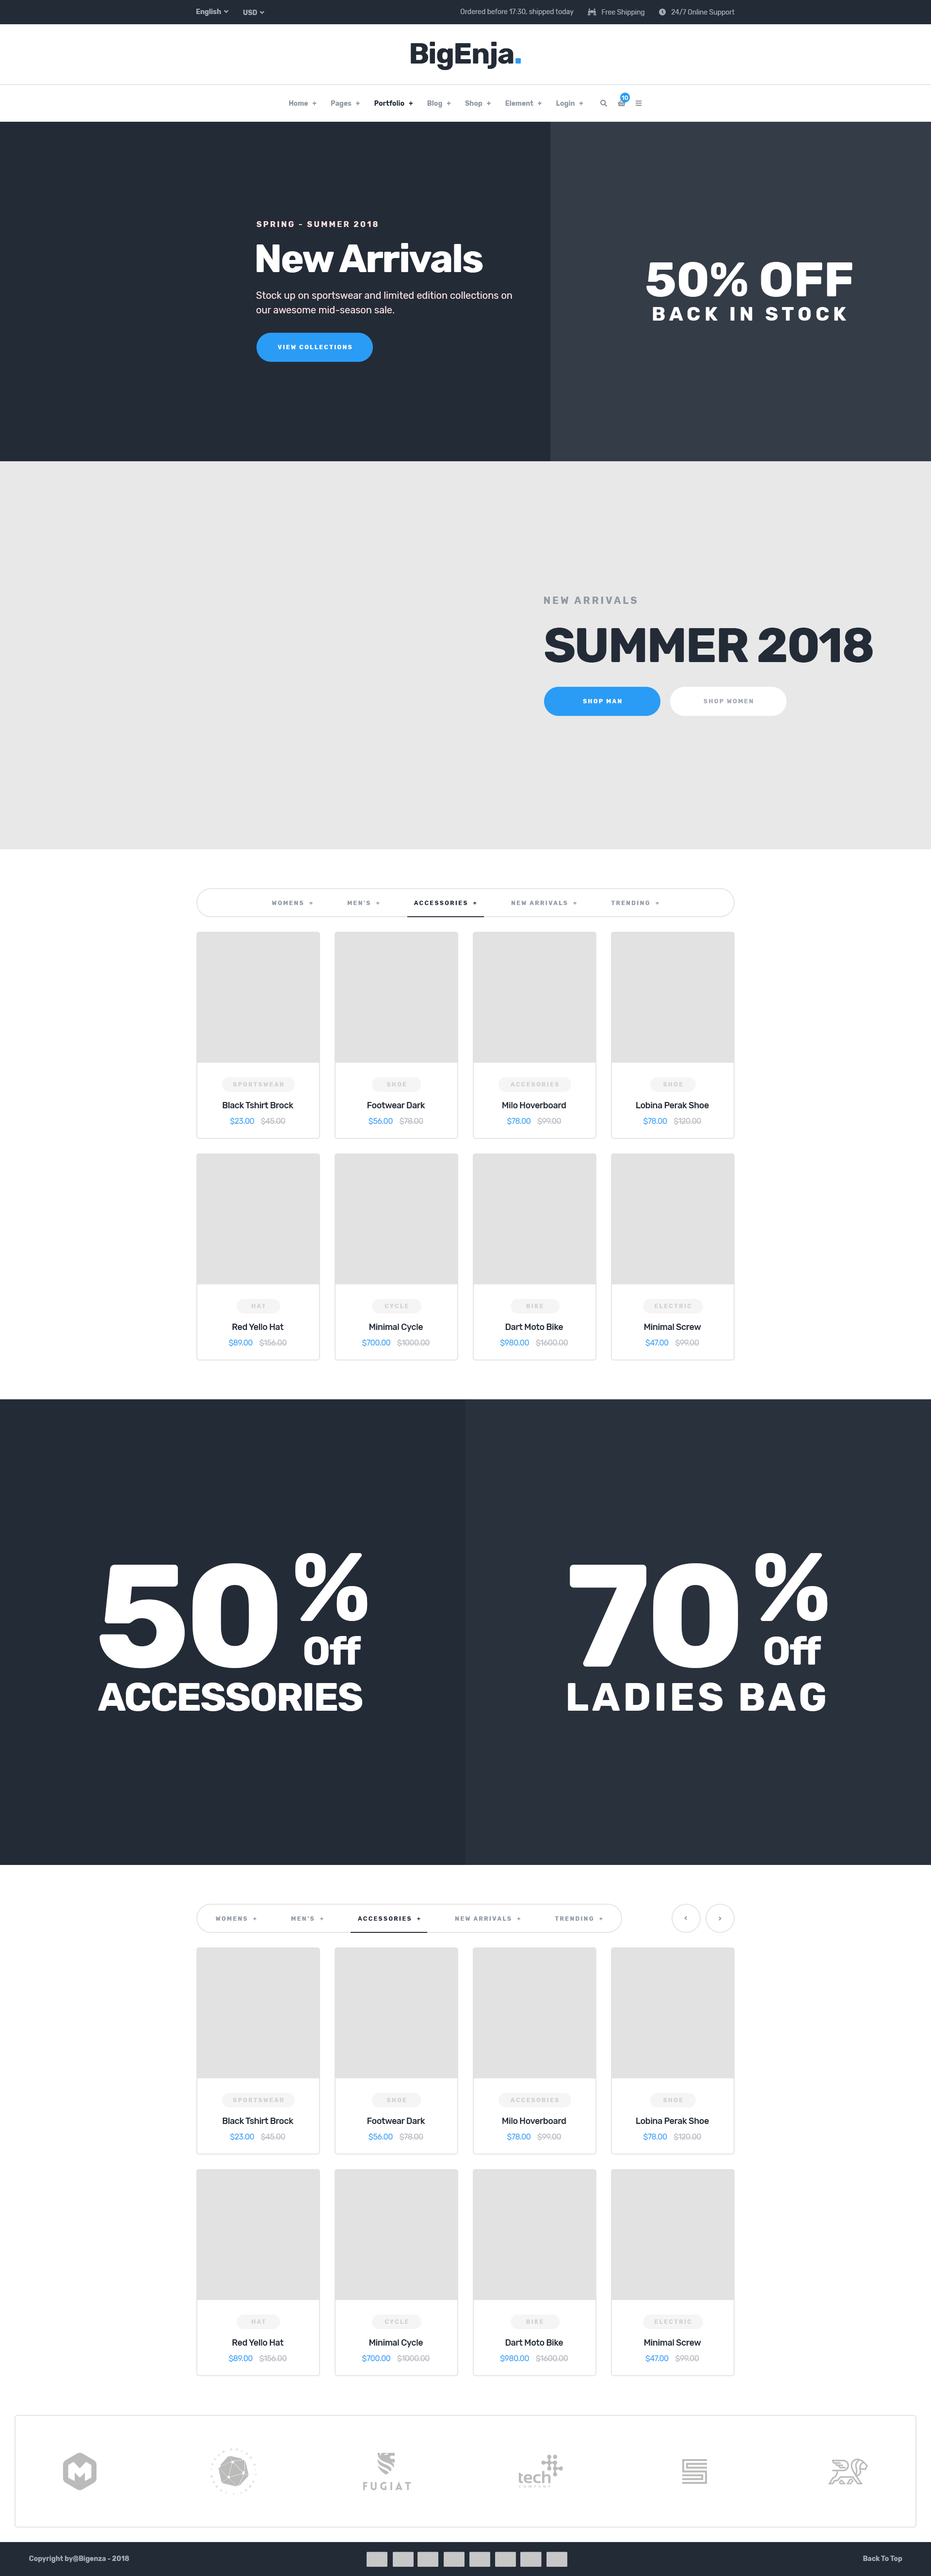
<style>
.page{position:relative;width:931px;height:2576px;background:#ffffff}
.page>*{position:absolute;margin:0}
.t1{font:6.8px "Rubik-Regular";color:#a3acb9}
.t2{font:29.1px "Rubik-Bold";letter-spacing:-0.03em;color:#232b37}
.t3{font:29.1px "Rubik-Bold";letter-spacing:-0.03em;color:#2a9cf5}
.t4{font:5.8px "Rubik-Medium";color:#ffffff}
.t5{font:7.8px "Rubik-Bold";letter-spacing:0.2em;color:#ffdfde;text-transform:uppercase}
.t6{font:38.8px "Rubik-Bold";letter-spacing:-0.03em;color:#ffffff}
.t7{font:19.4px/24.3px "Rubik-Bold";letter-spacing:0.2em;color:#ffffff}
.t8{font:48.5px/24.3px "Rubik-Bold";color:#ffffff}
.t9{font:9.7px/14.6px "Rubik-Regular";color:#ffe6e5}
.t10{font:5.8px "Rubik-Bold";letter-spacing:0.2em;color:#ffffff;text-transform:uppercase}
.t11{font:9.7px/58.2px "Rubik-Bold";letter-spacing:0.2em;color:#9097a2;text-transform:uppercase}
.t12{font:48.5px/58.2px "Rubik-Bold";letter-spacing:-0.03em;color:#232b37}
.t13{font:5.8px "Rubik-Bold";letter-spacing:0.2em;color:#9fa5af;text-transform:uppercase}
.t14{font:5.8px "Rubik-Bold";letter-spacing:0.2em;color:#8f97a2;text-transform:uppercase}
.t15{font:5.8px "Rubik-Bold";letter-spacing:0.2em;color:#232b37;text-transform:uppercase}
.t16{font:5.8px "Rubik-Bold";letter-spacing:0.2em;color:#d1d0d0;text-transform:uppercase}
.t17{font:8.7px "Rubik-Medium";letter-spacing:-0.03em;color:#232b37}
.t18{font:7.8px "Rubik-Regular";letter-spacing:-0.03em;color:#2a9cf5}
.t19{font:7.8px "Rubik-Regular";letter-spacing:-0.03em;color:#b0b5bc}
.t20{font:38.8px/43.7px "Rubik-Bold";letter-spacing:-0.03em;color:#ffffff}
.t21{font:97px/43.7px "Rubik-Bold";letter-spacing:-0.03em;color:#ffffff}
.t22{font:145.5px "Rubik-Bold";letter-spacing:-0.03em;color:#ffffff}
.t23{font:38.8px "Rubik-Bold";letter-spacing:0.08em;color:#ffffff;text-transform:uppercase}
.t24{font:6.8px "Rubik-Bold";color:#a4abb6}
</style>
<div class="page">
<p class="t1" style="left:461px;top:9px;width:113px;height:7px">Ordered before 17:30, shipped today</p>
<p class="t2" style="left:411px;top:42px;width:110px;height:28px">BigEnja<span class="t3">.</span></p>
<p class="t4" style="left:622px;top:96px;width:7px;height:4px">10</p>
<p class="t5" style="left:257px;top:221px;width:121px;height:6px">SPRING - SUMMER 2018</p>
<p class="t6" style="left:257px;top:243px;width:226px;height:30px">New Arrivals</p>
<p class="t7" style="left:647px;top:262px;width:206px;height:59px;text-align:center"><span class="t8">50% OFF<br></span>BACK IN STOCK</p>
<p class="t9" style="left:256px;top:292px;width:256px;height:21px">Stock up on sportswear and limited edition collections on<br>our awesome mid-season sale.</p>
<p class="t10" style="left:278px;top:345px;width:74px;height:4px">View Collections</p>
<p class="t11" style="left:544px;top:597px;width:329px;height:66px">NEW ARRIVALS<br><span class="t12">SUMMER 2018</span></p>
<p class="t10" style="left:583px;top:699px;width:39px;height:4px">shop man</p>
<p class="t13" style="left:704px;top:699px;width:49px;height:4px">shop women</p>
<p class="t14" style="left:272px;top:901px;width:387px;height:4px">Womens  +              MEN’S  +              <span class="t15">ACCESSORIES  +</span>              NEW ARRIVALS  +              trending  +</p>
<p class="t16" style="left:233px;top:1082px;width:51px;height:4px">Sportswear</p>
<p class="t16" style="left:387px;top:1082px;width:19px;height:4px">shoe</p>
<p class="t16" style="left:511px;top:1082px;width:48px;height:4px">accesories</p>
<p class="t16" style="left:663px;top:1082px;width:20px;height:4px">shoe</p>
<p class="t17" style="left:223px;top:1102px;width:70px;height:6px">Black Tshirt Brock</p>
<p class="t17" style="left:367px;top:1102px;width:58px;height:6px">Footwear Dark</p>
<p class="t17" style="left:502px;top:1102px;width:64px;height:6px">Milo Hoverboard</p>
<p class="t17" style="left:636px;top:1102px;width:73px;height:6px">Lobina Perak Shoe</p>
<p class="t18" style="left:230px;top:1118px;width:56px;height:7px">$23.00    <span class="t19">$45.00</span></p>
<p class="t18" style="left:369px;top:1118px;width:54px;height:7px">$56.00    <span class="t19">$78.00</span></p>
<p class="t18" style="left:507px;top:1118px;width:55px;height:7px">$78.00    <span class="t19">$99.00</span></p>
<p class="t19" style="left:644px;top:1118px;width:57px;height:7px"><span class="t18">$78.00    </span>$120.00</p>
<p class="t16" style="left:251px;top:1304px;width:15px;height:4px">hat</p>
<p class="t16" style="left:385px;top:1304px;width:23px;height:4px">cycle</p>
<p class="t16" style="left:526px;top:1304px;width:17px;height:4px">Bike</p>
<p class="t16" style="left:655px;top:1304px;width:37px;height:4px">electric</p>
<p class="t17" style="left:232px;top:1324px;width:52px;height:6px">Red Yello Hat</p>
<p class="t17" style="left:369px;top:1324px;width:54px;height:8px">Minimal Cycle</p>
<p class="t17" style="left:505px;top:1324px;width:58px;height:6px">Dart Moto Bike</p>
<p class="t17" style="left:644px;top:1324px;width:57px;height:6px">Minimal Screw</p>
<p class="t19" style="left:229px;top:1339px;width:58px;height:7px"><span class="t18">$89.00    </span>$156.00</p>
<p class="t19" style="left:362px;top:1339px;width:68px;height:7px"><span class="t18">$700.00    </span>$1000.00</p>
<p class="t19" style="left:500px;top:1339px;width:68px;height:7px"><span class="t18">$980.00    </span>$1600.00</p>
<p class="t18" style="left:646px;top:1339px;width:53px;height:7px">$47.00    <span class="t19">$99.00</span></p>
<p class="t20" style="left:295px;top:1553px;width:73px;height:112px;text-align:center"><span class="t21">%<br></span>Off</p>
<p class="t20" style="left:756px;top:1553px;width:72px;height:112px;text-align:center"><span class="t21">%<br></span>Off</p>
<p class="t22" style="left:99px;top:1563px;width:178px;height:106px">50</p>
<p class="t22" style="left:570px;top:1563px;width:168px;height:105px">70</p>
<p class="t6" style="left:98px;top:1683px;width:264px;height:28px">ACCESSORIES</p>
<p class="t23" style="left:568px;top:1683px;width:258px;height:28px">Ladies Bag</p>
<p class="t14" style="left:216px;top:1916px;width:387px;height:5px">Womens  +              MEN’S  +              <span class="t15">ACCESSORIES  +</span>              NEW ARRIVALS  +              trending  +</p>
<p class="t16" style="left:233px;top:2098px;width:51px;height:4px">Sportswear</p>
<p class="t16" style="left:387px;top:2098px;width:19px;height:4px">shoe</p>
<p class="t16" style="left:511px;top:2098px;width:48px;height:4px">accesories</p>
<p class="t16" style="left:663px;top:2098px;width:20px;height:4px">shoe</p>
<p class="t17" style="left:223px;top:2118px;width:70px;height:6px">Black Tshirt Brock</p>
<p class="t17" style="left:367px;top:2118px;width:58px;height:6px">Footwear Dark</p>
<p class="t17" style="left:502px;top:2118px;width:64px;height:6px">Milo Hoverboard</p>
<p class="t17" style="left:636px;top:2118px;width:73px;height:6px">Lobina Perak Shoe</p>
<p class="t18" style="left:230px;top:2133px;width:56px;height:7px">$23.00    <span class="t19">$45.00</span></p>
<p class="t18" style="left:369px;top:2133px;width:54px;height:7px">$56.00    <span class="t19">$78.00</span></p>
<p class="t18" style="left:507px;top:2133px;width:55px;height:7px">$78.00    <span class="t19">$99.00</span></p>
<p class="t19" style="left:644px;top:2133px;width:57px;height:7px"><span class="t18">$78.00    </span>$120.00</p>
<p class="t16" style="left:251px;top:2319px;width:15px;height:5px">hat</p>
<p class="t16" style="left:385px;top:2319px;width:23px;height:5px">cycle</p>
<p class="t16" style="left:526px;top:2319px;width:17px;height:5px">Bike</p>
<p class="t16" style="left:655px;top:2319px;width:37px;height:5px">electric</p>
<p class="t17" style="left:232px;top:2339px;width:52px;height:7px">Red Yello Hat</p>
<p class="t17" style="left:369px;top:2339px;width:54px;height:9px">Minimal Cycle</p>
<p class="t17" style="left:505px;top:2339px;width:58px;height:7px">Dart Moto Bike</p>
<p class="t17" style="left:644px;top:2339px;width:57px;height:7px">Minimal Screw</p>
<p class="t19" style="left:229px;top:2355px;width:58px;height:7px"><span class="t18">$89.00    </span>$156.00</p>
<p class="t19" style="left:362px;top:2355px;width:68px;height:7px"><span class="t18">$700.00    </span>$1000.00</p>
<p class="t19" style="left:500px;top:2355px;width:68px;height:7px"><span class="t18">$980.00    </span>$1600.00</p>
<p class="t18" style="left:646px;top:2355px;width:53px;height:7px">$47.00    <span class="t19">$99.00</span></p>
<p class="t24" style="left:29px;top:2556px;width:100px;height:7px">Copyright by@Bigenza - 2018</p>
<p class="t24" style="left:863px;top:2556px;width:40px;height:6px">Back To Top</p>
</div>
